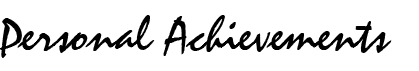
<style>
.page{position:relative;width:419px;height:71px;background:#ffffff}
.page>*{position:absolute;margin:0}
.t1{font:50px "STZephyr";color:#000000}
</style>
<div class="page">
<p class="t1" style="left:0px;top:15px;width:392px;height:43px">Personal Achievements</p>
</div>
